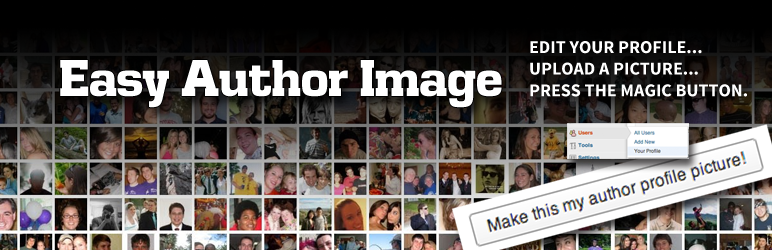
<style>
.page{position:relative;width:772px;height:250px}
.page>*{position:absolute;margin:0}
.t1{font:18px "SourceSansPro-Bold";color:#ffffff}
.t2{font:48px "SDEurostileEliteDemo";color:#ffffff}
</style>
<div class="page">
<p class="t1" style="left:530px;top:41px;width:217px;height:56px">EDIT YOUR PROFILE...<br>UPLOAD A PICTURE...<br>PRESS THE MAGIC BUTTON.</p>
<p class="t2" style="left:60px;top:60px;width:442px;height:48px">Easy Author Image</p>
</div>
